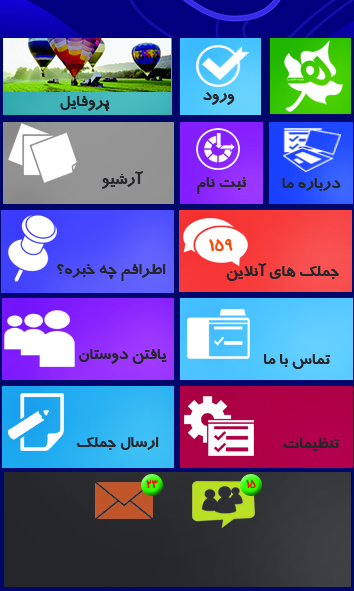
<style>
.page{position:relative;width:354px;height:591px}
.page>*{position:absolute;margin:0}
.t1{font:16.7px "BTrafficBold";color:#252629}
.t2{font:16.7px "BTrafficBold";color:#fe4801}
.t3{font:10.4px "BTrafficBold";color:#ff0101}
</style>
<div class="page">
<p class="t1" style="left:60px;top:96px;width:50px;height:15px">پروفايل</p>
<p class="t1" style="left:203px;top:92px;width:32px;height:13px">ورود</p>
<p class="t1" style="left:101px;top:171px;width:42px;height:18px">آرشيو</p>
<p class="t1" style="left:197px;top:177px;width:50px;height:17px">ثبت نام</p>
<p class="t1" style="left:282px;top:178px;width:59px;height:13px">درباره ما</p>
<p class="t2" style="left:209px;top:239px;width:24px;height:12px">159</p>
<p class="t1" style="left:57px;top:264px;width:109px;height:17px">اطرافم چه خبره؟</p>
<p class="t1" style="left:226px;top:263px;width:113px;height:18px">جملک هاي آنلاين</p>
<p class="t1" style="left:79px;top:349px;width:88px;height:15px">يافتن دوستان</p>
<p class="t1" style="left:264px;top:354px;width:66px;height:15px">تماس با ما</p>
<p class="t1" style="left:77px;top:437px;width:82px;height:13px">ارسال جملک</p>
<p class="t1" style="left:283px;top:438px;width:56px;height:13px">تنظيمات</p>
<p class="t3" style="left:146px;top:480px;width:12px;height:8px">23</p>
<p class="t3" style="left:246px;top:480px;width:10px;height:8px">15</p>
</div>
